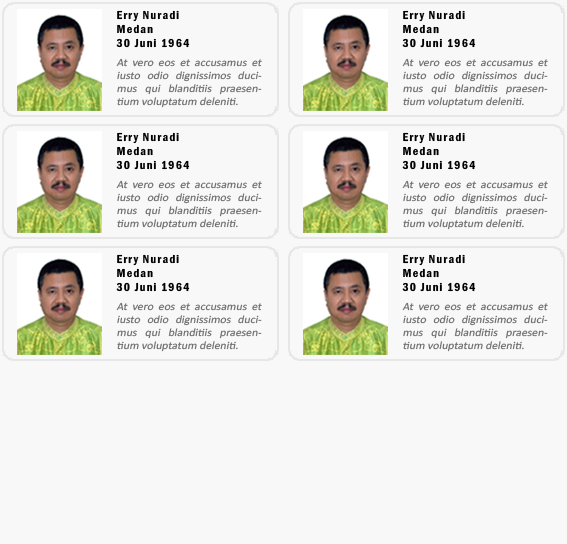
<style>
.page{position:relative;width:567px;height:544px;background:#f8f8f8}
.page>*{position:absolute;margin:0}
.t1{font:12px "FranklinGothic-DemiCond";letter-spacing:0.1em;color:#000000}
.t2{font:11px "Calibri";color:#6d6d6d;font-style:italic;scale:1.07 1}
</style>
<div class="page">
<p class="t1" style="left:117px;top:10px;width:62px;height:12px">Erry Nuradi</p>
<p class="t1" style="left:403px;top:10px;width:62px;height:12px">Erry Nuradi</p>
<p class="t1" style="left:117px;top:24px;width:36px;height:10px">Medan</p>
<p class="t1" style="left:403px;top:24px;width:36px;height:10px">Medan</p>
<p class="t1" style="left:116px;top:38px;width:74px;height:10px">30 Juni 1964</p>
<p class="t1" style="left:402px;top:38px;width:74px;height:10px">30 Juni 1964</p>
<p class="t2" style="left:116px;top:58px;width:146px;height:50px;text-align:justify">At vero eos et accusamus et iusto odio dignissimos ducimus qui blanditiis praesentium voluptatum deleniti.</p>
<p class="t2" style="left:402px;top:58px;width:146px;height:50px;text-align:justify">At vero eos et accusamus et iusto odio dignissimos ducimus qui blanditiis praesentium voluptatum deleniti.</p>
<p class="t1" style="left:117px;top:132px;width:62px;height:12px">Erry Nuradi</p>
<p class="t1" style="left:403px;top:132px;width:62px;height:12px">Erry Nuradi</p>
<p class="t1" style="left:117px;top:146px;width:36px;height:10px">Medan</p>
<p class="t1" style="left:403px;top:146px;width:36px;height:10px">Medan</p>
<p class="t1" style="left:116px;top:160px;width:74px;height:10px">30 Juni 1964</p>
<p class="t1" style="left:402px;top:160px;width:74px;height:10px">30 Juni 1964</p>
<p class="t2" style="left:116px;top:180px;width:146px;height:50px;text-align:justify">At vero eos et accusamus et iusto odio dignissimos ducimus qui blanditiis praesentium voluptatum deleniti.</p>
<p class="t2" style="left:402px;top:180px;width:146px;height:50px;text-align:justify">At vero eos et accusamus et iusto odio dignissimos ducimus qui blanditiis praesentium voluptatum deleniti.</p>
<p class="t1" style="left:117px;top:254px;width:62px;height:12px">Erry Nuradi</p>
<p class="t1" style="left:403px;top:254px;width:62px;height:12px">Erry Nuradi</p>
<p class="t1" style="left:117px;top:268px;width:36px;height:10px">Medan</p>
<p class="t1" style="left:403px;top:268px;width:36px;height:10px">Medan</p>
<p class="t1" style="left:116px;top:282px;width:74px;height:10px">30 Juni 1964</p>
<p class="t1" style="left:402px;top:282px;width:74px;height:10px">30 Juni 1964</p>
<p class="t2" style="left:116px;top:302px;width:146px;height:50px;text-align:justify">At vero eos et accusamus et iusto odio dignissimos ducimus qui blanditiis praesentium voluptatum deleniti.</p>
<p class="t2" style="left:402px;top:302px;width:146px;height:50px;text-align:justify">At vero eos et accusamus et iusto odio dignissimos ducimus qui blanditiis praesentium voluptatum deleniti.</p>
</div>
